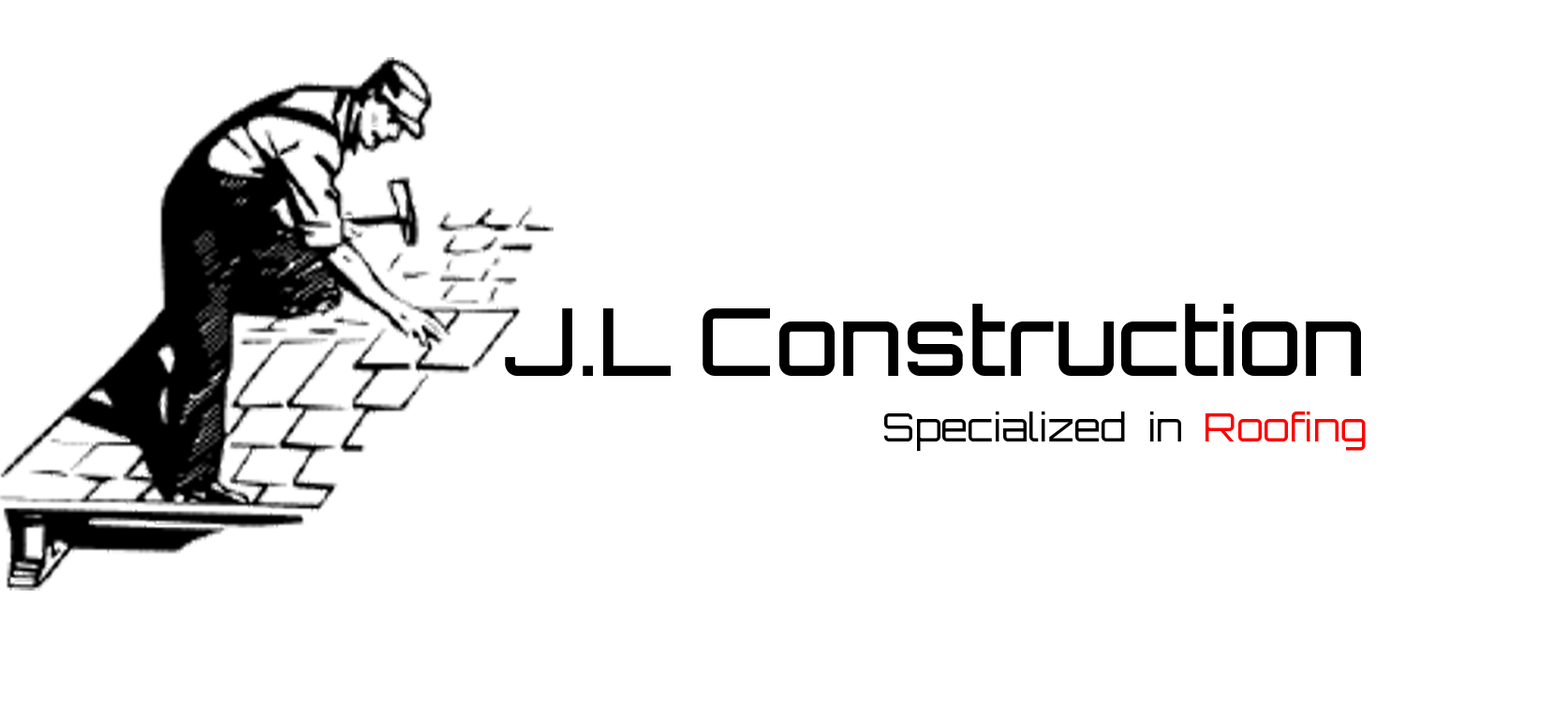
<style>
.page{position:relative;width:1568px;height:703px;background:#ffffff}
.page>*{position:absolute;margin:0}
.t1{font:93.7px "Orbitron-Medium";color:#000000}
.t2{font:39px "Orbitron-Light";color:#000000}
.t3{font:39px "Orbitron-Light";color:#ff0000}
</style>
<div class="page">
<p class="t1" style="left:505px;top:303px;width:856px;height:73px">J.L Construction</p>
<p class="t2" style="left:884px;top:411px;width:482px;height:40px">Specialized  in <span class="t3"> Roofing</span></p>
</div>
